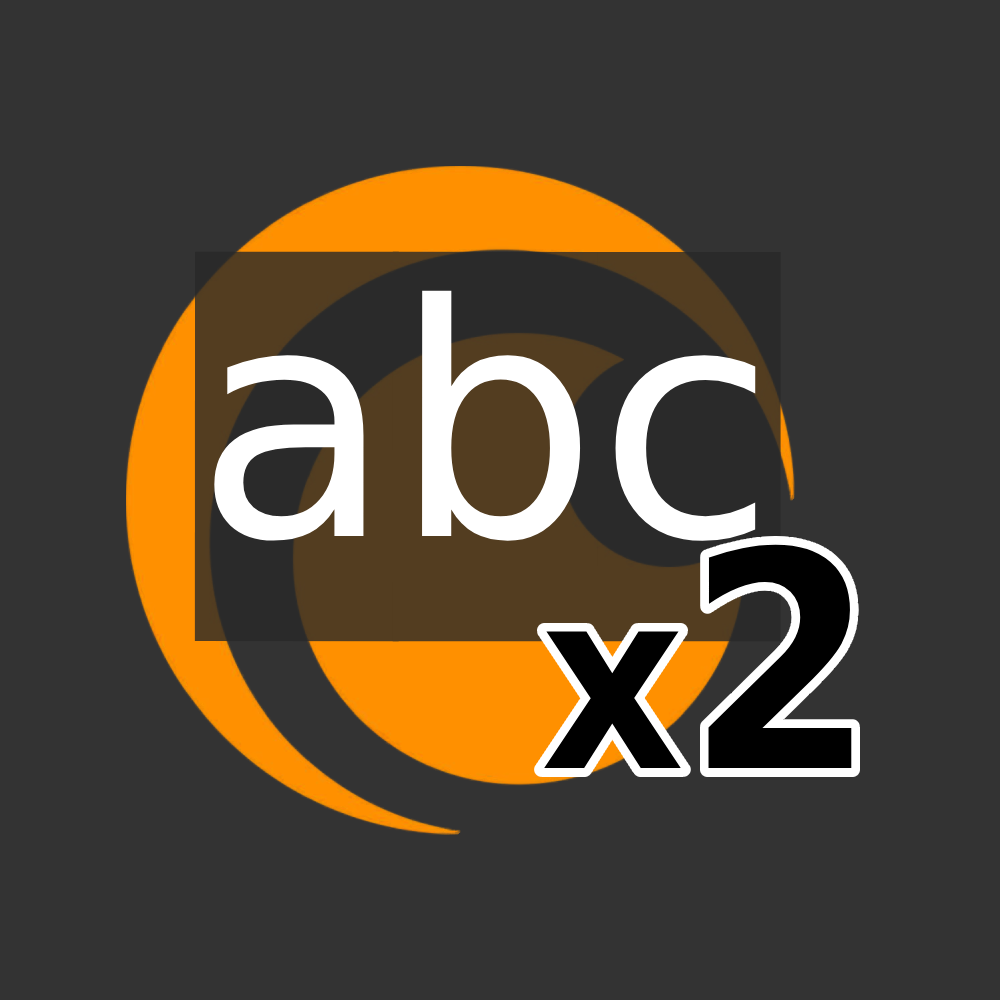
<style>
.page{position:relative;width:1000px;height:1000px;background:#333333}
.page>*{position:absolute;margin:0}
.t1{font:322.8px "DejaVuSans";color:#ffffff}
.t2{font:253.1px "DejaVuSansCondensed-Bold";color:#000000}
.t3{font:303.3px "DejaVuSansCondensed-Bold";color:#000000}
</style>
<div class="page">
<p class="t1" style="left:214px;top:290px;width:542px;height:251px">abc</p>
<p class="t2" style="left:540px;top:543px;width:314px;height:227px">x<span class="t3">2</span></p>
</div>
